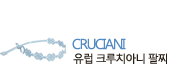
<style>
.page{position:relative;width:169px;height:76px;background:#ffffff}
.page>*{position:absolute;margin:0}
.t1{font:14px "MalgunGothicRegular";letter-spacing:-0.1em;color:#538ac3}
.t2{font:11px "MalgunGothicRegular";letter-spacing:-0.1em;color:#271e15}
</style>
<div class="page">
<p class="t1" style="left:72px;top:38px;width:54px;height:12px">CRUCIANI</p>
<p class="t2" style="left:73px;top:53px;width:94px;height:11px">유럽 크루치아니 팔찌</p>
</div>
